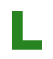
<style>
.page{position:relative;width:53px;height:59px;background:#ffffff}
.page>*{position:absolute;margin:0}
.t1{font:48px "ShinGoPro-Ultra";letter-spacing:-0.1em;color:#288321;font-weight:bold}
</style>
<div class="page">
<p class="t1" style="left:12px;top:11px;width:30px;height:39px">L</p>
</div>
